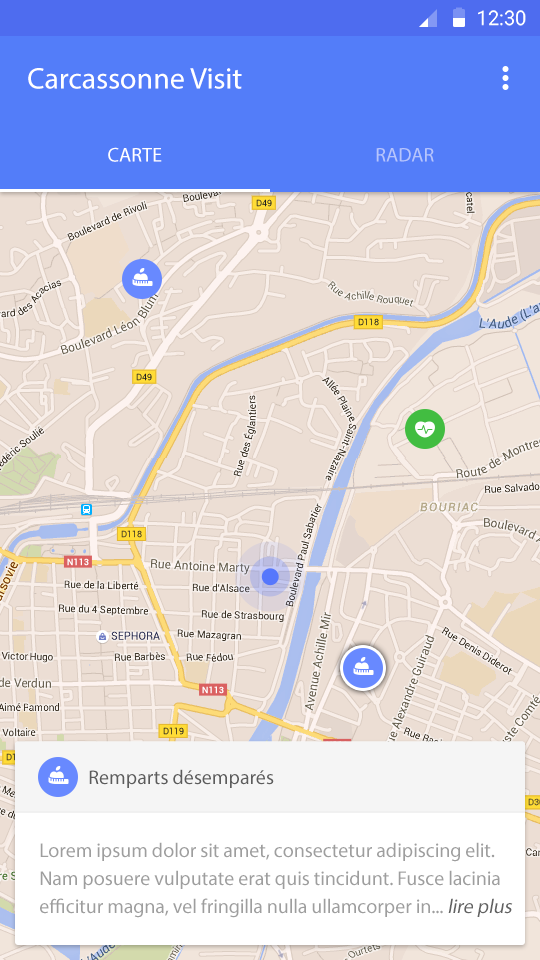
<style>
.page{position:relative;width:540px;height:960px;background:#ecded4}
.page>*{position:absolute;margin:0}
.t1{font:20px "Roboto-Regular";color:#ffffff}
.t2{font:30px "MyriadPro-Regular";color:#ffffff}
.t3{font:20px "MyriadPro-Regular";color:#ffffff}
.t4{font:20px "MyriadPro-Regular";color:#b6c5fc}
.t5{font:20px "MyriadPro-Regular";color:#5c5c5c}
.t6{font:20px/28px "MyriadPro-Regular";color:#9e9e9e}
.t7{font:20px/28px "MyriadPro-Regular";color:#626262;font-style:italic}
</style>
<div class="page">
<p class="t1" style="left:478px;top:10px;width:48px;height:16px">12:30</p>
<p class="t2" style="left:28px;top:68px;width:214px;height:21px">Carcassonne Visit</p>
<p class="t3" style="left:108px;top:147px;width:54px;height:15px">CARTE</p>
<p class="t4" style="left:376px;top:148px;width:58px;height:14px">RADAR</p>
<p class="t5" style="left:89px;top:769px;width:185px;height:19px">Remparts désemparés</p>
<p class="t6" style="left:40px;top:842px;width:473px;height:76px">Lorem ipsum dolor sit amet, consectetur adipiscing elit. <br>Nam posuere vulputate erat quis tincidunt. Fusce lacinia <br>efficitur magna, vel fringilla nulla ullamcorper in... <span class="t7">lire plus</span></p>
</div>
